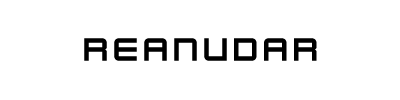
<style>
.page{position:relative;width:400px;height:100px;background:#ffffff}
.page>*{position:absolute;margin:0}
.t1{font:36px "KenVector-Future";color:#000000}
</style>
<div class="page">
<p class="t1" style="left:84px;top:38px;width:233px;height:23px">Reanudar</p>
</div>
